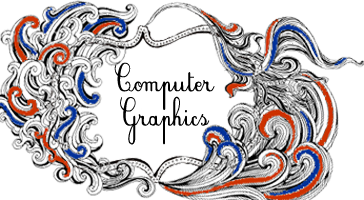
<style>
.page{position:relative;width:364px;height:200px;background:#ffffff}
.page>*{position:absolute;margin:0}
.t1{font:31.4px "PlumBAE";color:#000000;scale:0.91 1}
</style>
<div class="page">
<p class="t1" style="left:114px;top:62px;width:101px;height:83px;text-align:center">Computer<br>Graphics</p>
</div>
